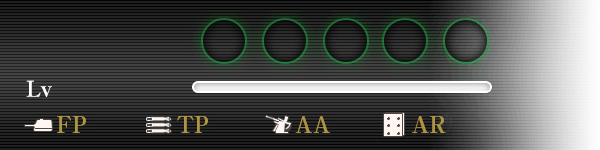
<style>
.page{position:relative;width:600px;height:150px}
.page>*{position:absolute;margin:0}
.t1{font:22px "RyuminPro-ExBold";color:#af9441}
</style>
<div class="page">
<p class="t1" style="left:57px;top:116px;width:29px;height:17px">FP</p>
<p class="t1" style="left:177px;top:116px;width:31px;height:17px">TP</p>
<p class="t1" style="left:295px;top:116px;width:35px;height:17px">AA</p>
<p class="t1" style="left:412px;top:116px;width:34px;height:17px">AR</p>
</div>
